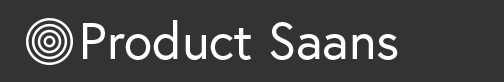
<style>
.page{position:relative;width:504px;height:82px;background:#333333}
.page>*{position:absolute;margin:0}
.t1{font:52px "Europa-Regular";color:#ffffff}
</style>
<div class="page">
<p class="t1" style="left:83px;top:20px;width:315px;height:40px">Product Saans</p>
</div>
